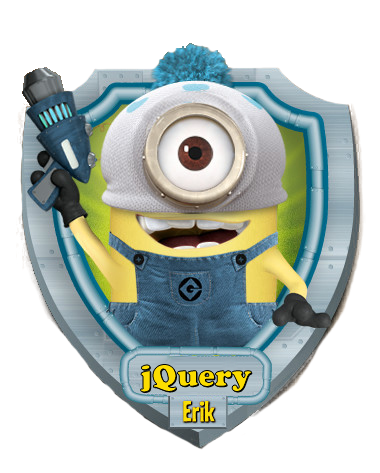
<style>
.page{position:relative;width:380px;height:473px;background:#ffffff}
.page>*{position:absolute;margin:0}
.t1{font:30px "CooperBlackStd";color:#fcdd00}
</style>
<div class="page">
<p class="t1" style="left:140px;top:364px;width:112px;height:28px">jQuery</p>
</div>
